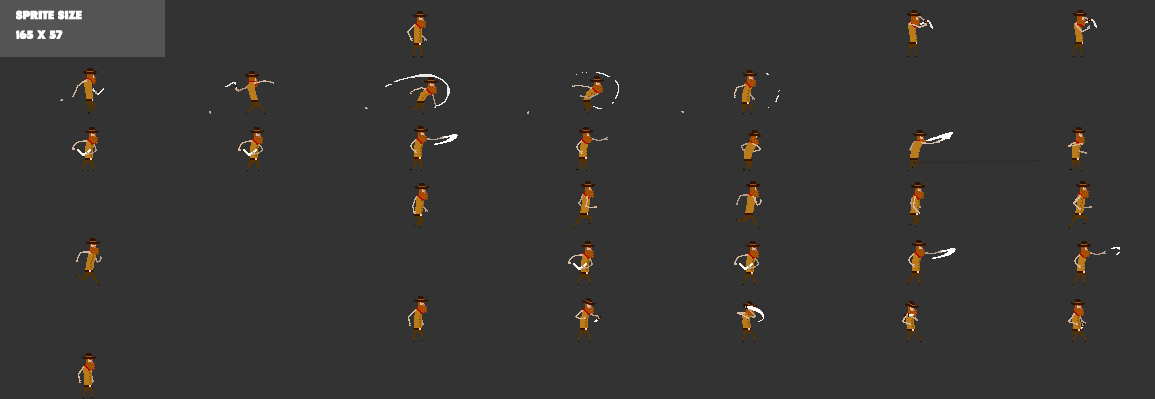
<style>
.page{position:relative;width:1155px;height:399px;background:#333333}
.page>*{position:absolute;margin:0}
.t1{font:12px "Tondu-Beta";color:#ffffff;text-transform:uppercase}
</style>
<div class="page">
<p class="t1" style="left:16px;top:10px;width:66px;height:10px">sprite size</p>
<p class="t1" style="left:16px;top:30px;width:47px;height:9px">165 x 57</p>
</div>
